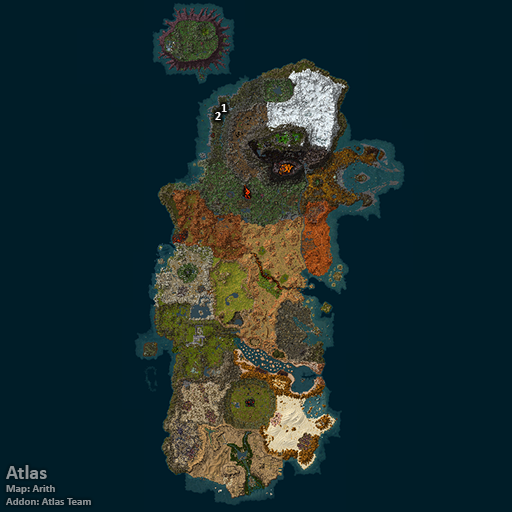
<style>
.page{position:relative;width:512px;height:512px;background:#001d28}
.page>*{position:absolute;margin:0}
.t1{font:12px "Calibri-Bold";color:#ffffff}
.t2{font:11px "Calibri-Bold";color:#8d9396}
.t3{font:20px "Calibri-Bold";color:#8d9396}
</style>
<div class="page">
<p class="t1" style="left:215px;top:112px;width:6px;height:8px">2</p>
<p class="t1" style="left:221px;top:104px;width:6px;height:8px">1</p>
<p class="t2" style="left:6px;top:465px;width:85px;height:40px"><span class="t3">Atlas<br></span>Map: Arith<br>Addon: Atlas Team</p>
</div>
